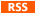
<style>
.page{position:relative;width:36px;height:14px;background:#ff5a00}
.page>*{position:absolute;margin:0}
.t1{font:11.2px "Formata-Medium";color:#ffffff;scale:1.04 1}
</style>
<div class="page">
<p class="t1" style="left:8px;top:2px;width:20px;height:10px">RSS</p>
</div>
